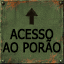
<style>
.page{position:relative;width:64px;height:64px}
.page>*{position:absolute;margin:0}
.t1{font:13.3px/13.3px "Tahoma";color:#000000;text-transform:uppercase;font-weight:bold;scale:0.87 1}
</style>
<div class="page">
<p class="t1" style="left:2px;top:28px;width:59px;height:25px;text-align:center">Acesso<br>ao porão</p>
</div>
